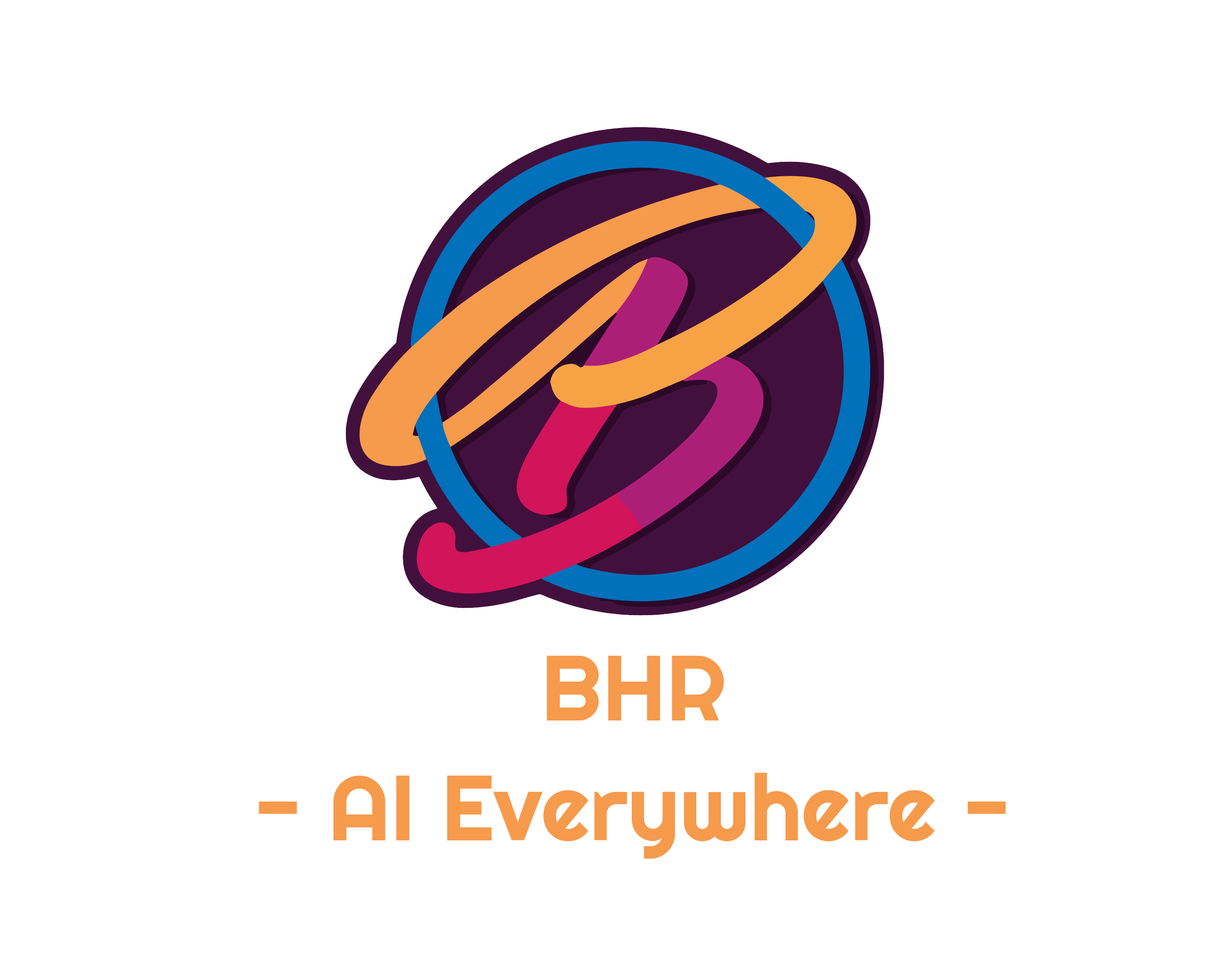
<style>
.page{position:relative;width:1217px;height:980px;background:#ffffff}
.page>*{position:absolute;margin:0}
.t1{font:92.5px "Righteous-Regular";color:#f69a4c}
</style>
<div class="page">
<p class="t1" style="left:546px;top:655px;width:178px;height:65px">BHR</p>
<p class="t1" style="left:259px;top:772px;width:747px;height:87px">- AI Everywhere -</p>
</div>
